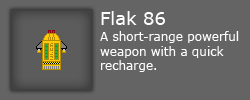
<style>
.page{position:relative;width:250px;height:100px;background:#646464}
.page>*{position:absolute;margin:0}
.t1{font:18px "Verdana";color:#ffffff}
.t2{font:12px "Verdana";color:#ffffff}
</style>
<div class="page">
<p class="t1" style="left:101px;top:11px;width:64px;height:14px">Flak 86</p>
<p class="t2" style="left:100px;top:31px;width:139px;height:41px">A short-range powerful weapon with a quick recharge.</p>
</div>
